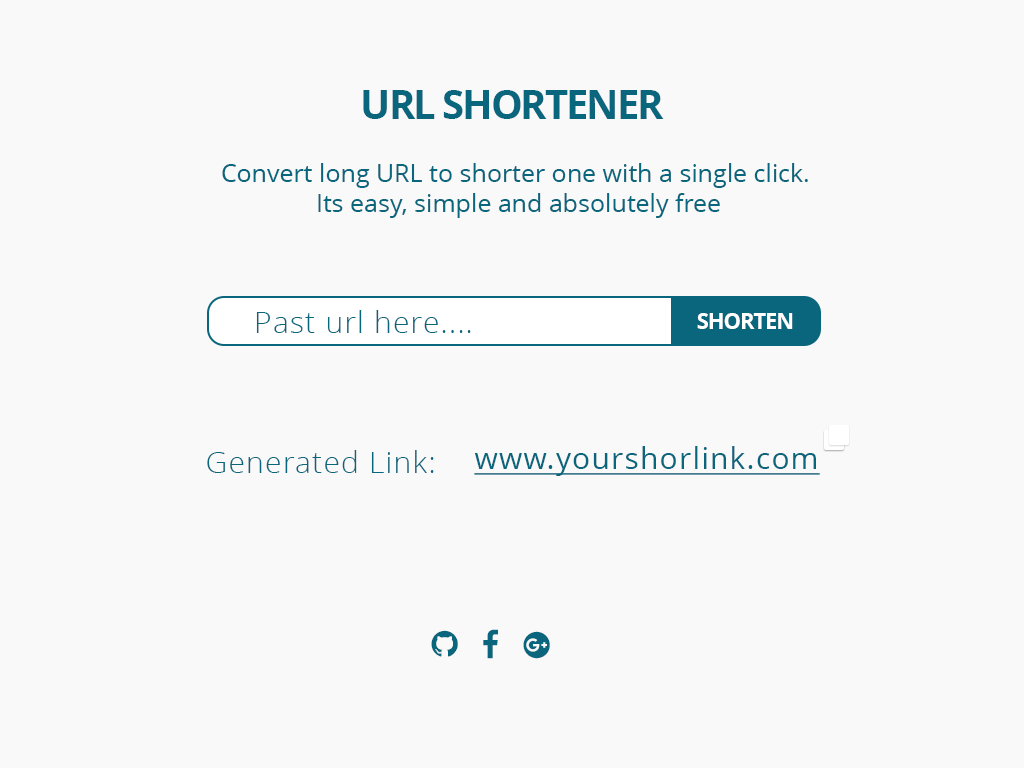
<style>
.page{position:relative;width:1024px;height:768px;background:#f9f9f9}
.page>*{position:absolute;margin:0}
.t1{font:40px "OpenSans-Bold";letter-spacing:-0.05em;color:#0a667d;text-transform:uppercase}
.t2{font:25px "OpenSans";color:#0a667d}
.t3{font:30px "OpenSans-Light";letter-spacing:0.04em;color:#0a667d}
.t4{font:22px "OpenSans-Bold";letter-spacing:-0.05em;color:#ffffff;text-transform:uppercase}
.t5{font:30px "OpenSans";letter-spacing:0.04em;color:#0a667d;text-decoration:underline}
</style>
<div class="page">
<p class="t1" style="left:363px;top:90px;width:301px;height:29px">url shortener</p>
<p class="t2" style="left:222px;top:163px;width:586px;height:55px;text-align:center">Convert long URL to shorter one with a single click. <br>Its easy, simple and absolutely free</p>
<p class="t3" style="left:256px;top:310px;width:215px;height:23px">Past url here....</p>
<p class="t4" style="left:697px;top:313px;width:96px;height:16px">Shorten</p>
<p class="t5" style="left:474px;top:446px;width:346px;height:30px">www.yourshorlink.com</p>
<p class="t3" style="left:207px;top:450px;width:227px;height:23px">Generated Link:</p>
</div>
